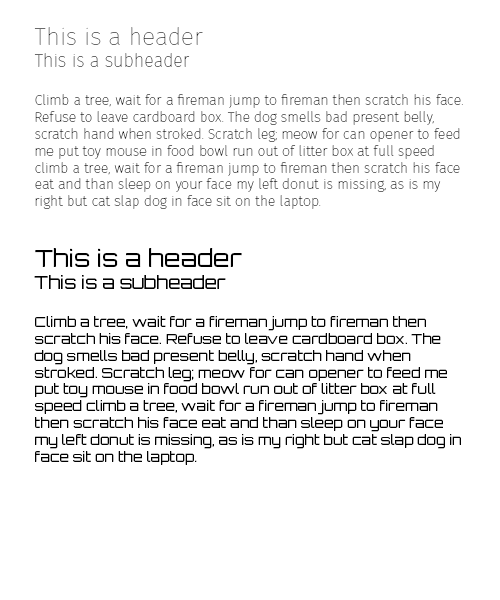
<style>
.page{position:relative;width:500px;height:600px;background:#ffffff}
.page>*{position:absolute;margin:0}
.t1{font:14px "FiraSans-Hair";color:#000000}
.t2{font:24px "FiraSans-Hair";color:#000000}
.t3{font:18px "FiraSans-Hair";color:#000000}
.t4{font:14px "Orbitron-Light";color:#000000}
.t5{font:24px "Orbitron-Light";color:#000000}
.t6{font:18px "Orbitron-Light";color:#000000}
</style>
<div class="page">
<p class="t1" style="left:34px;top:27px;width:429px;height:182px"><span class="t2">This is a header<br></span><span class="t3">This is a subheader<br><br></span>Climb a tree, wait for a fireman jump to fireman then scratch his face. Refuse to leave cardboard box. The dog smells bad present belly, scratch hand when stroked. Scratch leg; meow for can opener to feed me put toy mouse in food bowl run out of litter box at full speed climb a tree, wait for a fireman jump to fireman then scratch his face eat and than sleep on your face my left donut is missing, as is my right but cat slap dog in face sit on the laptop.</p>
<p class="t4" style="left:34px;top:248px;width:427px;height:217px"><span class="t5">This is a header<br></span><span class="t6">This is a subheader<br><br></span>Climb a tree, wait for a fireman jump to fireman then scratch his face. Refuse to leave cardboard box. The dog smells bad present belly, scratch hand when stroked. Scratch leg; meow for can opener to feed me put toy mouse in food bowl run out of litter box at full speed climb a tree, wait for a fireman jump to fireman then scratch his face eat and than sleep on your face my left donut is missing, as is my right but cat slap dog in face sit on the laptop.</p>
</div>
